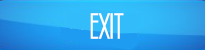
<style>
.page{position:relative;width:205px;height:50px}
.page>*{position:absolute;margin:0}
.t1{font:37px "StyleThief";color:#ffffff}
</style>
<div class="page">
<p class="t1" style="left:90px;top:13px;width:34px;height:26px">EXIT</p>
</div>
